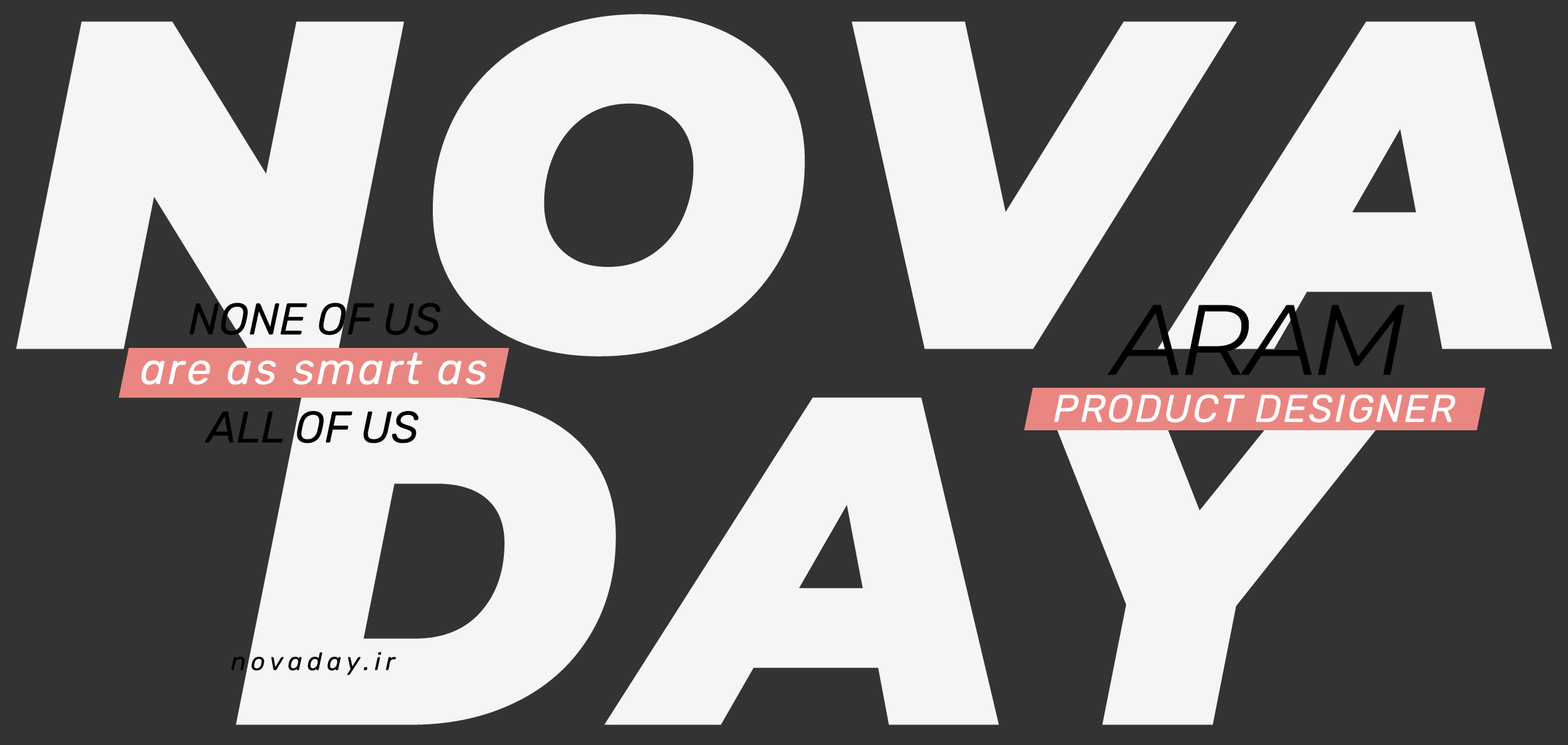
<style>
.page{position:relative;width:1568px;height:745px;background:#333333}
.page>*{position:absolute;margin:0}
.t1{font:467.1px/375.8px "Montserrat-BlackItalic";letter-spacing:0.05em;color:#f5f5f5}
.t2{font:44.3px "Rubik-Italic";color:#000000}
.t3{font:99.6px "Montserrat-Italic";letter-spacing:-0.05em;color:#000000}
.t4{font:44.3px "Rubik-Italic";letter-spacing:0.05em;color:#ffffff}
.t5{font:38.7px "Rubik-Italic";letter-spacing:0.05em;color:#ffffff}
.t6{font:24.9px "Rubik-Italic";letter-spacing:0.2em;color:#000000}
</style>
<div class="page">
<p class="t1" style="left:16px;top:14px;width:1536px;height:711px;text-align:center">NOVA<br>DAY</p>
<p class="t2" style="left:189px;top:303px;width:252px;height:32px">NONE OF US</p>
<p class="t3" style="left:1107px;top:305px;width:298px;height:70px">ARAM</p>
<p class="t4" style="left:141px;top:353px;width:346px;height:32px">are as smart as</p>
<p class="t5" style="left:1054px;top:394px;width:401px;height:29px">PRODUCT DESIGNER</p>
<p class="t2" style="left:205px;top:411px;width:214px;height:32px">ALL OF US</p>
<p class="t6" style="left:231px;top:652px;width:165px;height:23px">novaday.ir</p>
</div>
